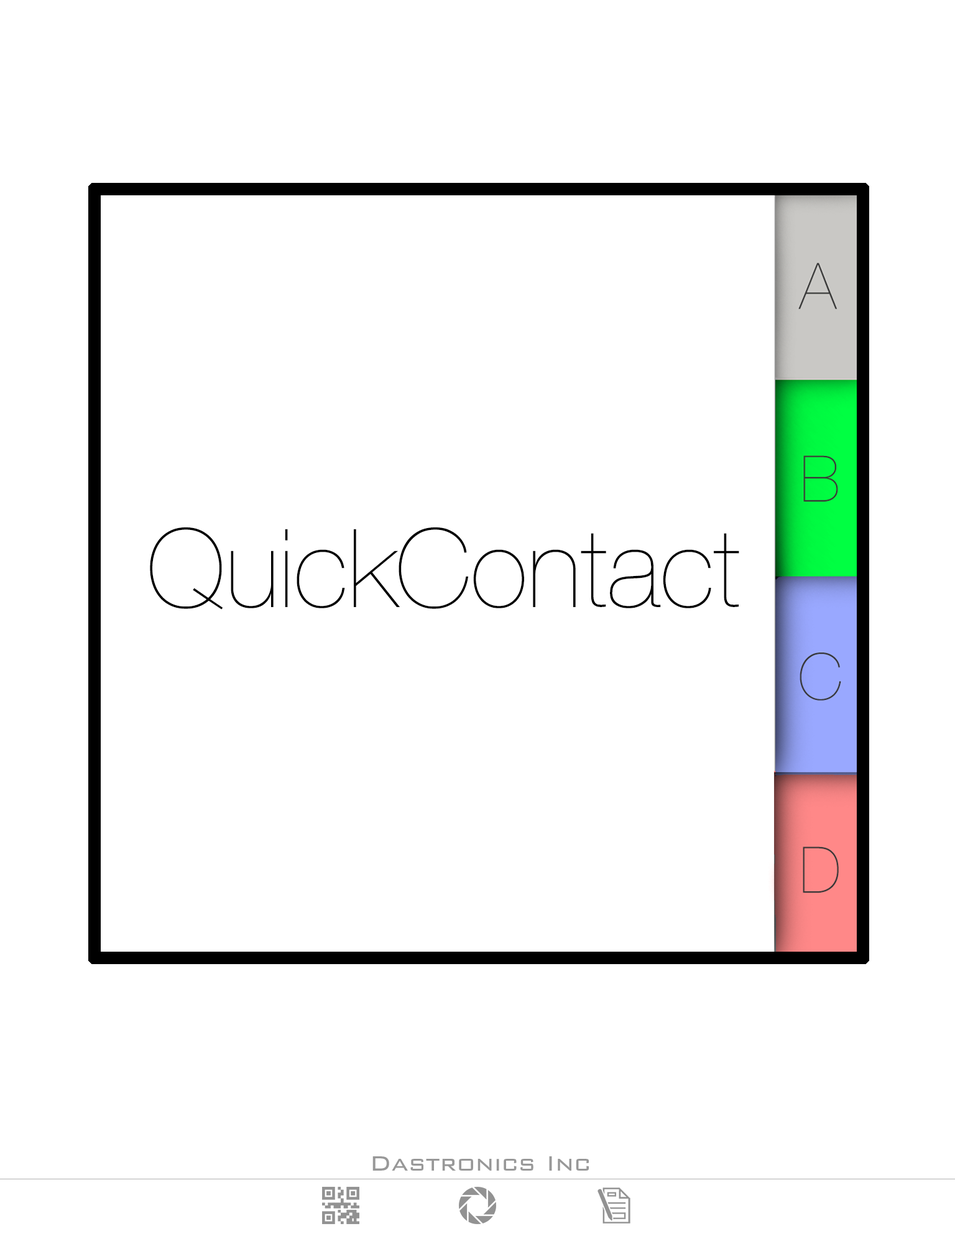
<style>
.page{position:relative;width:955px;height:1249px;background:#ffffff}
.page>*{position:absolute;margin:0}
.t1{font:186.5px "HelveticaNeue-UltraLight";color:#000000}
.t2{font:46.6px "BankGothic-Light";color:#989898}
</style>
<div class="page">
<p class="t1" style="left:150px;top:527px;width:589px;height:82px">QuickContact</p>
<p class="t2" style="left:372px;top:1156px;width:217px;height:14px">Dastronics Inc</p>
</div>
